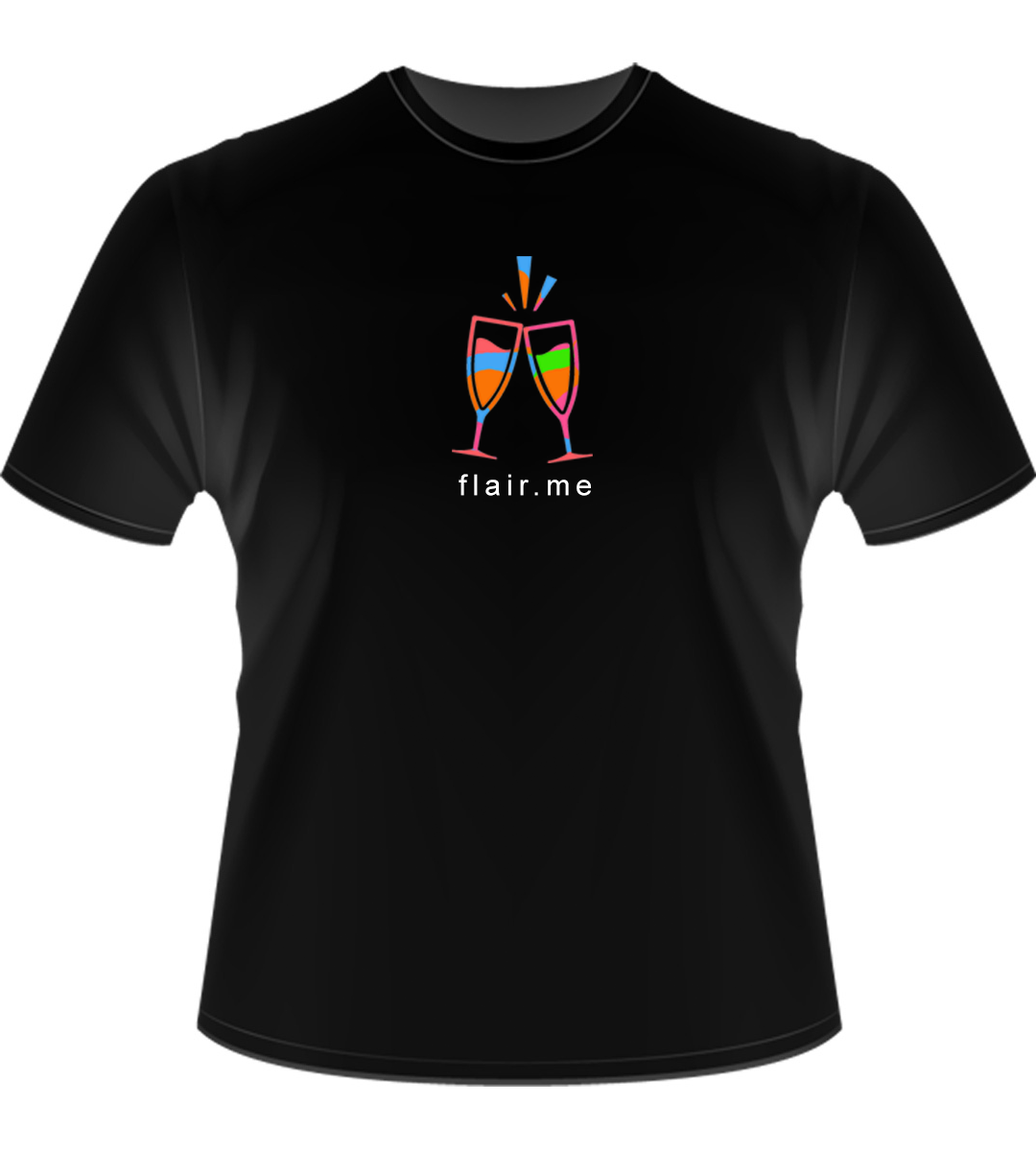
<style>
.page{position:relative;width:1036px;height:1151px;background:#ffffff}
.page>*{position:absolute;margin:0}
.t1{font:28.8px "ArialMT";letter-spacing:0.2em;color:#ffffff}
</style>
<div class="page">
<p class="t1" style="left:459px;top:474px;width:132px;height:22px">flair.me</p>
</div>
